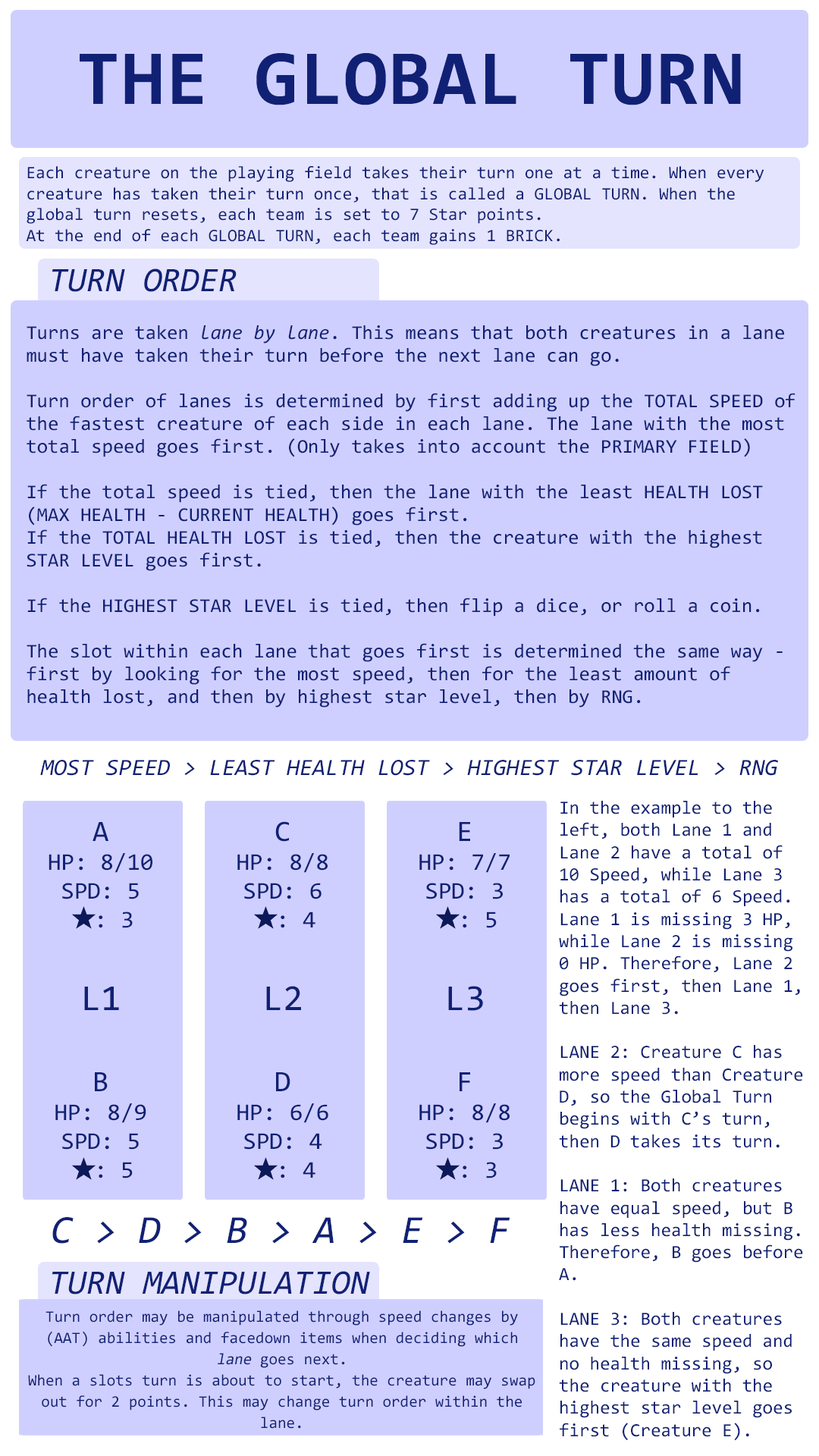
<style>
.page{position:relative;width:819px;height:1456px;background:#cfcfff}
.page>*{position:absolute;margin:0}
.t1{font:78.3px "Consolas-Bold";letter-spacing:0.02em;color:#102175}
.t2{font:17.4px "Consolas";color:#102175}
.t3{font:34.3px "Consolas-Italic";color:#102175}
.t4{font:19.7px/22.7px "Consolas";color:#102175}
.t5{font:19.7px/22.7px "Consolas-Italic";color:#102175}
.t6{font:23.5px "Consolas-Italic";color:#102175}
.t7{font:18.5px "Consolas";color:#102175}
.t8{font:24.1px "Consolas";color:#102175}
.t9{font:29.6px "Consolas";color:#102175}
.t10{font:37px "Consolas";color:#102175}
.t11{font:39.8px "Consolas-Italic";color:#102175}
.t12{font:15.9px/21.2px "Consolas";color:#102175}
.t13{font:15.9px/21.2px "Consolas";color:#102175;font-style:italic}
</style>
<div class="page">
<p class="t1" style="left:80px;top:53px;width:661px;height:52px">THE GLOBAL TURN</p>
<p class="t2" style="left:26px;top:166px;width:738px;height:79px">Each creature on the playing field takes their turn one at a time. When every creature has taken their turn once, that is called a GLOBAL TURN. When the global turn resets, each team is set to 7 Star points.<br>At the end of each GLOBAL TURN, each team gains 1 BRICK.</p>
<p class="t3" style="left:52px;top:268px;width:185px;height:24px">TURN ORDER</p>
<p class="t4" style="left:27px;top:325px;width:768px;height:383px">Turns are taken <span class="t5">lane by lane</span>. This means that both creatures in a lane must have taken their turn before the next lane can go.<br><br>Turn order of lanes is determined by first adding up the TOTAL SPEED of the fastest creature of each side in each lane. The lane with the most total speed goes first. (Only takes into account the PRIMARY FIELD)<br><br>If the total speed is tied, then the lane with the least HEALTH LOST (MAX HEALTH - CURRENT HEALTH) goes first.<br>If the TOTAL HEALTH LOST is tied, then the creature with the highest STAR LEVEL goes first.<br><br>If the HIGHEST STAR LEVEL is tied, then flip a dice, or roll a coin.<br><br>The slot within each lane that goes first is determined the same way - first by looking for the most speed, then for the least amount of health lost, and then by highest star level, then by RNG.</p>
<p class="t6" style="left:40px;top:760px;width:738px;height:16px">MOST SPEED &gt; LEAST HEALTH LOST &gt; HIGHEST STAR LEVEL &gt; RNG</p>
<p class="t7" style="left:559px;top:801px;width:244px;height:640px">In the example to the left, both Lane 1 and Lane 2 have a total of 10 Speed, while Lane 3 has a total of 6 Speed. Lane 1 is missing 3 HP, while Lane 2 is missing 0 HP. Therefore, Lane 2 goes first, then Lane 1, then Lane 3. <br><br>LANE 2: Creature C has more speed than Creature D, so the Global Turn begins with C’s turn, then D takes its turn. <br><br>LANE 1: Both creatures have equal speed, but B has less health missing. Therefore, B goes before A. <br><br>LANE 3: Both creatures have the same speed and no health missing, so the creature with the highest star level goes first (Creature E).</p>
<p class="t8" style="left:237px;top:821px;width:91px;height:107px;text-align:center"><span class="t9">C<br></span>HP: 8/8<br>SPD: 6<br>  : 4</p>
<p class="t8" style="left:49px;top:822px;width:103px;height:106px;text-align:center"><span class="t9">A<br></span>HP: 8/10<br>SPD: 5<br>  : 3</p>
<p class="t8" style="left:419px;top:822px;width:91px;height:106px;text-align:center"><span class="t9">E<br></span>HP: 7/7<br>SPD: 3<br>  : 5</p>
<p class="t10" style="left:84px;top:987px;width:35px;height:23px">L1</p>
<p class="t10" style="left:266px;top:986px;width:35px;height:24px">L2</p>
<p class="t10" style="left:448px;top:986px;width:35px;height:25px">L3</p>
<p class="t8" style="left:55px;top:1072px;width:91px;height:106px;text-align:center"><span class="t9">B<br></span>HP: 8/9<br>SPD: 5<br>  : 5</p>
<p class="t8" style="left:237px;top:1072px;width:91px;height:106px;text-align:center"><span class="t9">D<br></span>HP: 6/6<br>SPD: 4<br>  : 4</p>
<p class="t8" style="left:419px;top:1072px;width:91px;height:106px;text-align:center"><span class="t9">F<br></span>HP: 8/8<br>SPD: 3<br>  : 3</p>
<p class="t11" style="left:52px;top:1217px;width:458px;height:27px">C &gt; D &gt; B &gt; A &gt; E &gt; F</p>
<p class="t3" style="left:52px;top:1271px;width:318px;height:23px">TURN MANIPULATION</p>
<p class="t12" style="left:28px;top:1310px;width:507px;height:119px;text-align:center">Turn order may be manipulated through speed changes by (AAT) abilities and facedown items when deciding which <span class="t13">lane</span> goes next.<br>When a slots turn is about to start, the creature may swap out for 2 points. This may change turn order within the lane.</p>
</div>
